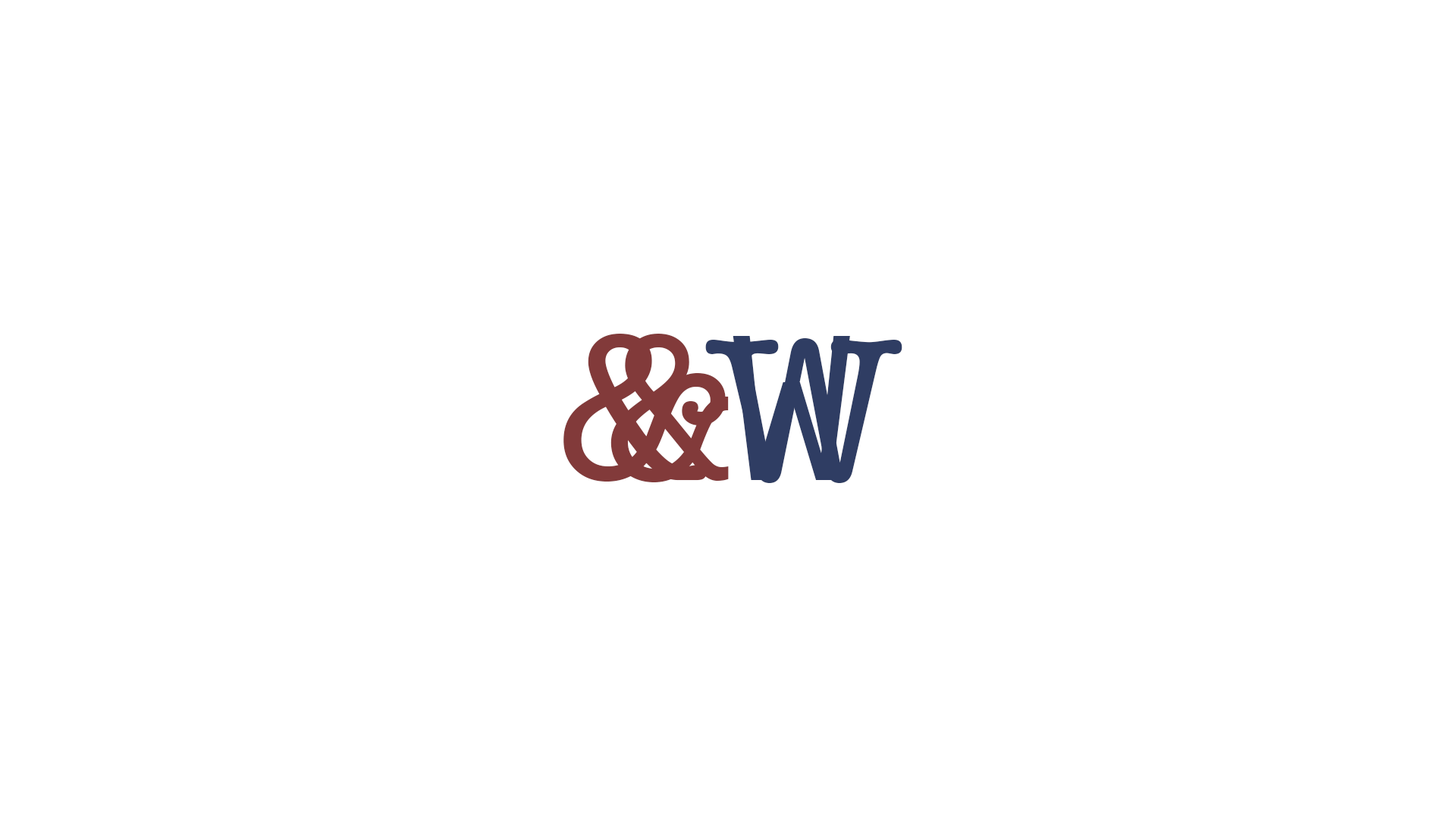
<style>
.page{position:relative;width:1456px;height:819px;background:#ffffff}
.page>*{position:absolute;margin:0}
.t1{font:209.1px "AmericanTypewriter";letter-spacing:-0.1em;color:#823a3a}
.t2{font:209.1px "AmericanTypewriter";letter-spacing:-0.1em;color:#2f3d63}
.t3{font:209.1px "AndaleMono";color:#823a3a}
.t4{font:209.1px "AndaleMono";color:#2f3d63}
</style>
<div class="page">
<p class="t1" style="left:563px;top:334px;width:339px;height:149px">&amp;<span class="t2">W</span></p>
<p class="t3" style="left:610px;top:334px;width:240px;height:148px">&amp;<span class="t4">W</span></p>
</div>
